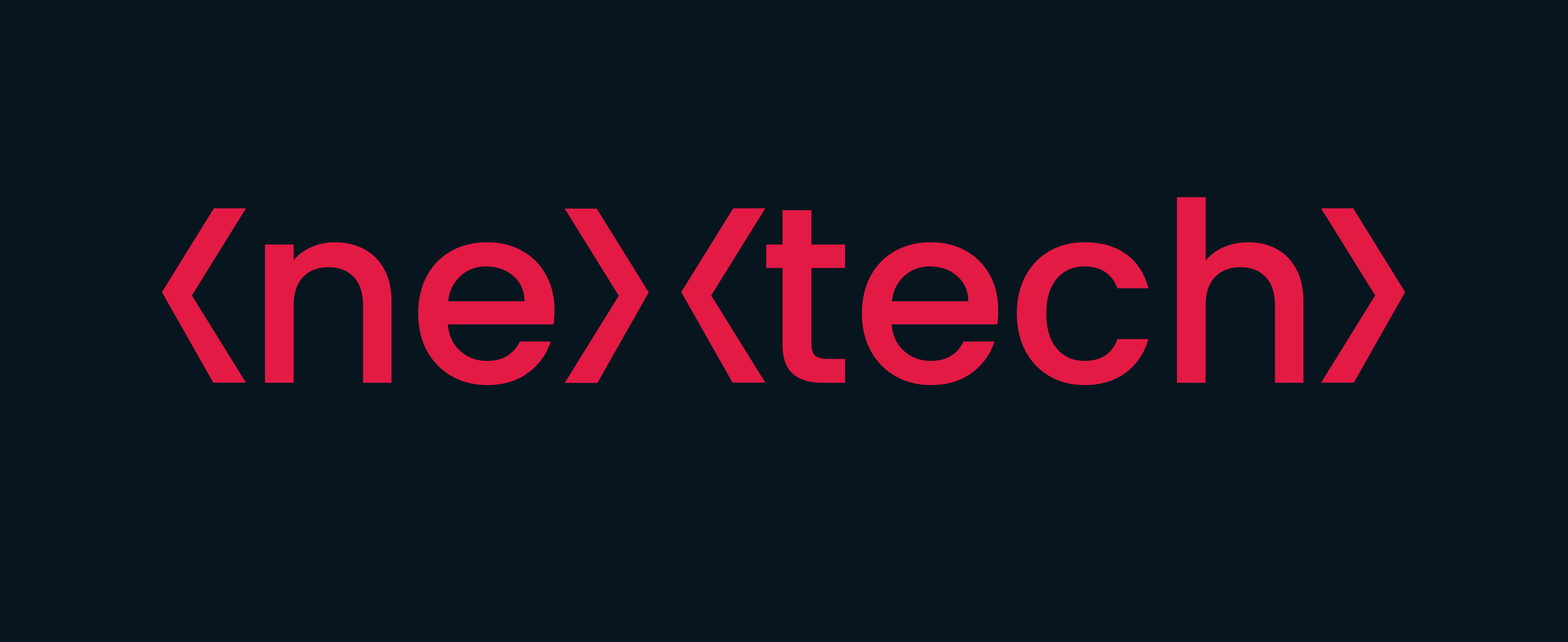
<style>
.page{position:relative;width:1568px;height:642px;background:#07151f}
.page>*{position:absolute;margin:0}
.t1{font:250.9px "Poppins-Medium";color:#e31a44}
</style>
<div class="page">
<p class="t1" style="left:265px;top:197px;width:1039px;height:188px">ne   tech</p>
</div>
